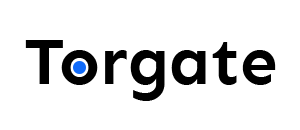
<style>
.page{position:relative;width:300px;height:130px;background:#ffffff}
.page>*{position:absolute;margin:0}
.t1{font:66.7px "Sen-Bold";color:#000000}
</style>
<div class="page">
<p class="t1" style="left:25px;top:40px;width:251px;height:61px">Torgate</p>
</div>
